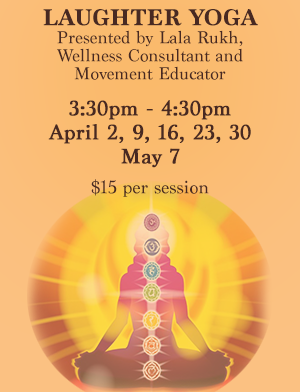
<style>
.page{position:relative;width:300px;height:392px}
.page>*{position:absolute;margin:0}
.t1{font:18px/18px "Marion-Regular";letter-spacing:0.01em;color:#482922}
.t2{font:24px/30px "Marion-Bold";letter-spacing:0.01em;color:#482922}
.t3{font:22px/24px "Marion-Regular";letter-spacing:0.01em;color:#482922;font-weight:bold}
.t4{font:19px/18px "Marion-Regular";letter-spacing:0.01em;color:#482922}
</style>
<div class="page">
<p class="t1" style="left:43px;top:9px;width:215px;height:188px;text-align:center"><span class="t2">LAUGHTER YOGA<br></span>Presented by Lala Rukh, <br>Wellness Consultant and <br>Movement Educator<br><br><br><span class="t3">3:30pm - 4:30pm<br>April 2, 9, 16, 23, 30<br>May 7<br><br><br></span><span class="t4">$15 per session</span></p>
</div>
